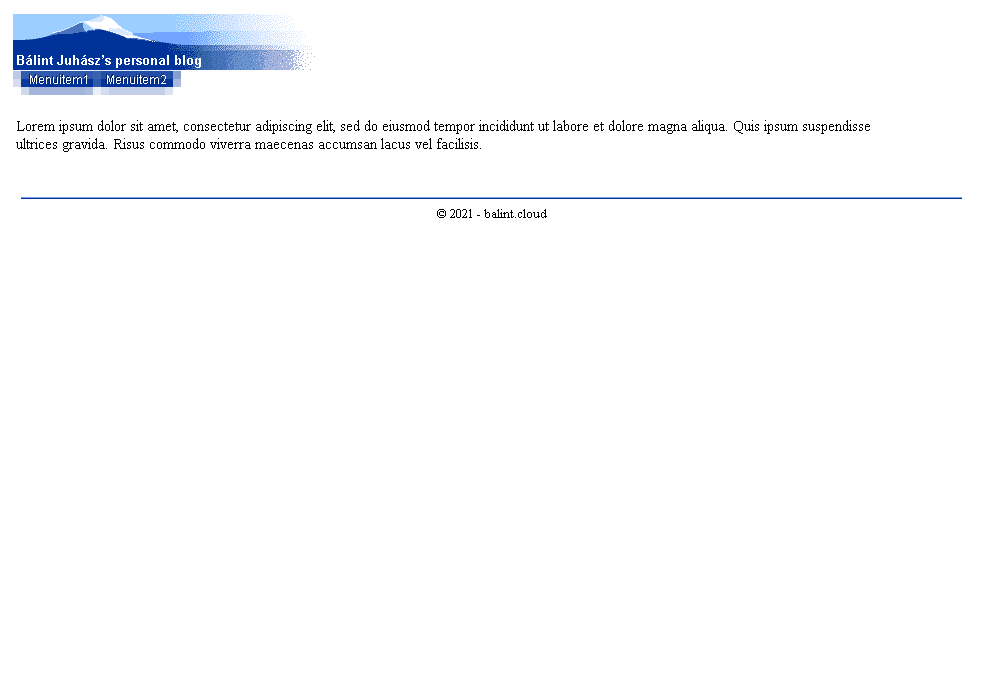
<style>
.page{position:relative;width:1000px;height:700px;background:#ffffff}
.page>*{position:absolute;margin:0}
.t1{font:13px "Arial-BoldMT";color:#ffffff}
.t2{font:12px "ArialMT";color:#012161}
.t3{font:12px "ArialMT";color:#ffffff}
.t4{font:15px "TimesNewRomanPSMT";color:#000000}
.t5{font:13px "TimesNewRomanPSMT";color:#000000}
</style>
<div class="page">
<p class="t1" style="left:17px;top:55px;width:184px;height:13px">Bálint Juhász’s personal blog</p>
<p class="t2" style="left:29px;top:74px;width:57px;height:9px">Menuitem1</p>
<p class="t3" style="left:30px;top:75px;width:57px;height:9px">Menuitem1</p>
<p class="t2" style="left:106px;top:74px;width:57px;height:9px">Menuitem1</p>
<p class="t3" style="left:107px;top:75px;width:59px;height:9px">Menuitem2</p>
<p class="t4" style="left:16px;top:120px;width:854px;height:32px">Lorem ipsum dolor sit amet, consectetur adipiscing elit, sed do eiusmod tempor incididunt ut labore et dolore magna aliqua. Quis ipsum suspendisse ultrices gravida. Risus commodo viverra maecenas accumsan lacus vel facilisis.</p>
<p class="t5" style="left:437px;top:209px;width:110px;height:9px">© 2021 - balint.cloud</p>
</div>
